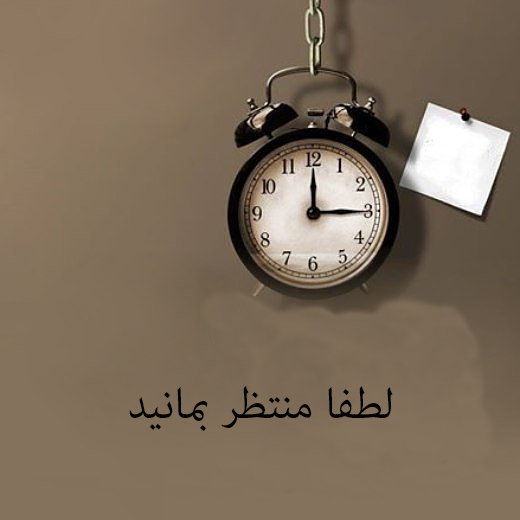
<style>
.page{position:relative;width:520px;height:520px}
.page>*{position:absolute;margin:0}
.t1{font:60px "AdobeArabic-Regular";color:#000000}
</style>
<div class="page">
<p class="t1" style="left:129px;top:386px;width:264px;height:45px">لطفا منتظر بمانید</p>
</div>
